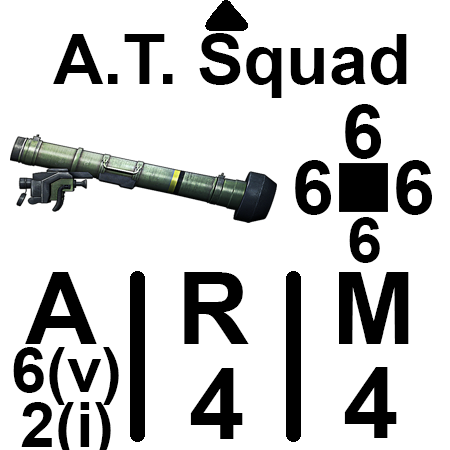
<style>
.page{position:relative;width:450px;height:450px;background:#ffffff}
.page>*{position:absolute;margin:0}
.t1{font:70px "Arial-BoldMT";color:#000000}
.t2{font:75px "Arial-BoldMT";color:#000000}
.t3{font:62.5px "Arial-BoldMT";color:#000000}
.t4{font:100px "Arial-BoldMT";color:#000000}
</style>
<div class="page">
<p class="t1" style="left:53px;top:33px;width:354px;height:65px"><span class="t2"> </span>A.T. Squad</p>
<p class="t2" style="left:345px;top:104px;width:36px;height:55px">6</p>
<p class="t2" style="left:295px;top:160px;width:36px;height:55px">6</p>
<p class="t2" style="left:396px;top:160px;width:36px;height:55px">6</p>
<p class="t3" style="left:349px;top:217px;width:31px;height:46px">6</p>
<p class="t4" style="left:25px;top:272px;width:384px;height:72px">A   R   M</p>
<p class="t3" style="left:13px;top:347px;width:106px;height:58px">6(v)</p>
<p class="t4" style="left:190px;top:368px;width:53px;height:71px">4</p>
<p class="t4" style="left:344px;top:367px;width:53px;height:71px">4</p>
</div>
